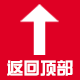
<style>
.page{position:relative;width:80px;height:80px;background:#df0024}
.page>*{position:absolute;margin:0}
.t1{font:16.7px "HYk1gj";color:#ffffff}
</style>
<div class="page">
<p class="t1" style="left:7px;top:60px;width:66px;height:16px">返回顶部</p>
</div>
